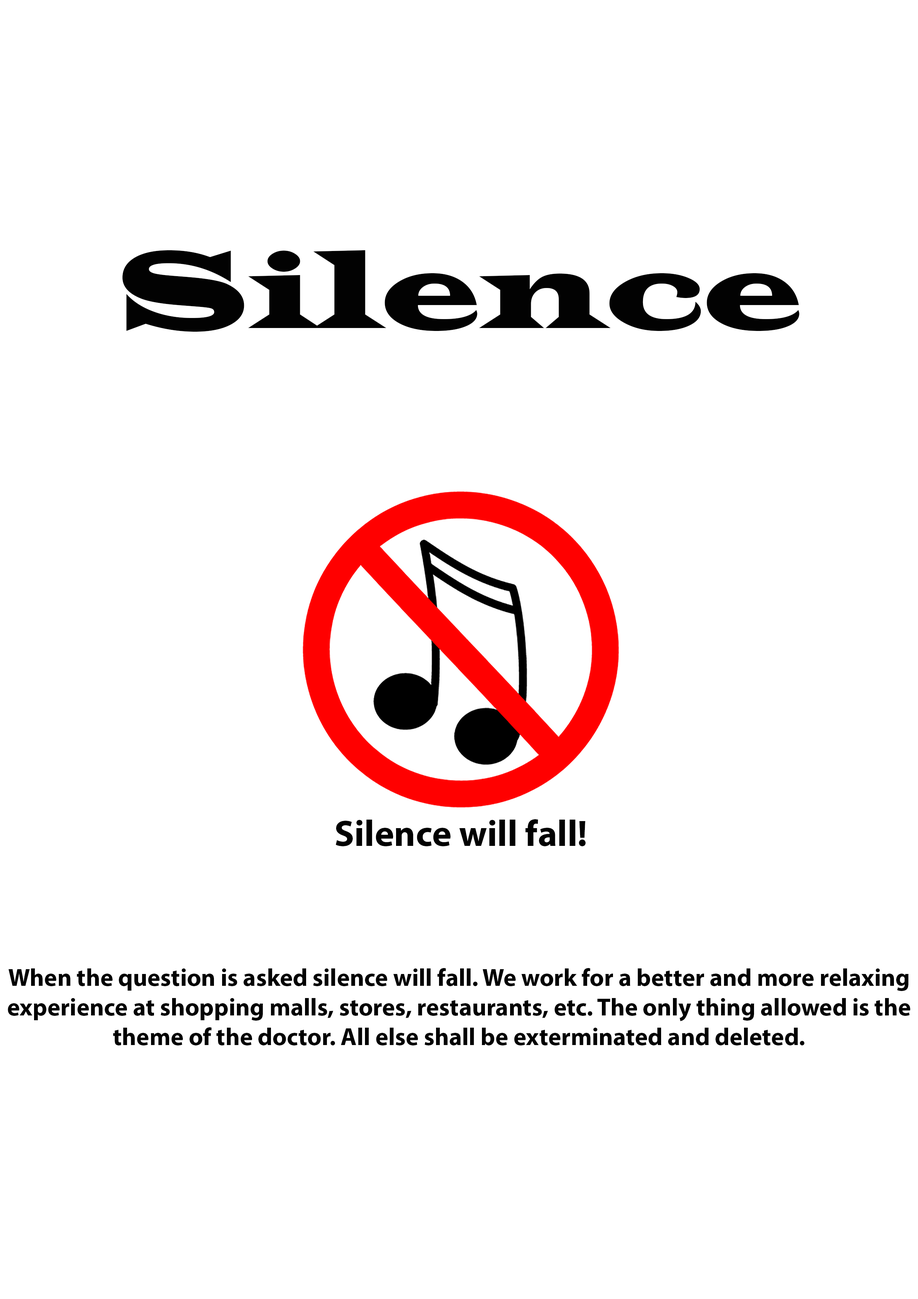
<style>
.page{position:relative;width:918px;height:1299px;background:#ffffff}
.page>*{position:absolute;margin:0}
.t1{font:111.1px "LatinWide";color:#020202}
.t2{font:37px "MyriadPro-Bold";color:#020202}
.t3{font:24.7px "MyriadPro-Bold";color:#020202}
</style>
<div class="page">
<p class="t1" style="left:122px;top:250px;width:678px;height:82px">Silence</p>
<p class="t2" style="left:336px;top:819px;width:250px;height:27px">Silence will fall!</p>
<p class="t3" style="left:8px;top:968px;width:902px;height:77px;text-align:center">When the question is asked silence will fall. We work for a better and more relaxing experience at shopping malls, stores, restaurants, etc. The only thing allowed is the theme of the doctor. All else shall be exterminated and deleted.</p>
</div>
